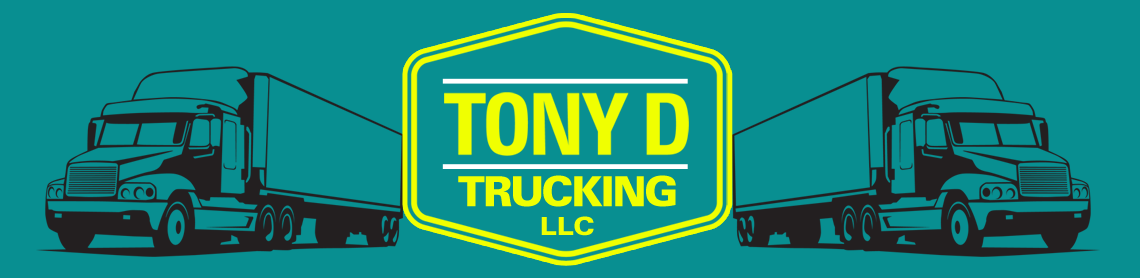
<style>
.page{position:relative;width:1140px;height:278px;background:#088f91}
.page>*{position:absolute;margin:0}
.t1{font:85.2px "ZurichBT-BoldCondensed";letter-spacing:-0.05em;color:#f0ff01;text-transform:uppercase}
.t2{font:85.2px "ZurichBT-BoldCondensed";letter-spacing:-0.025em;color:#f0ff01;text-transform:uppercase}
.t3{font:41.6px "ZurichBT-Black";letter-spacing:-0.05em;color:#f0ff01;text-transform:uppercase}
.t4{font:25px "ZurichBT-BlackExtended";color:#f0ff01;text-transform:uppercase}
</style>
<div class="page">
<p class="t1" style="left:444px;top:92px;width:245px;height:64px">To<span class="t2">n</span>y D</p>
<p class="t3" style="left:458px;top:175px;width:218px;height:32px">trucking</p>
<p class="t4" style="left:541px;top:216px;width:53px;height:20px">LLC</p>
</div>
